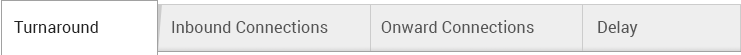
<style>
.page{position:relative;width:741px;height:55px;background:#eeeeee}
.page>*{position:absolute;margin:0}
.t1{font:16px "Roboto-Regular";color:#222222}
.t2{font:16px "Roboto-Regular";color:#555555}
</style>
<div class="page">
<p class="t1" style="left:14px;top:21px;width:84px;height:12px">Turnaround</p>
<p class="t2" style="left:172px;top:20px;width:156px;height:13px">Inbound Connections</p>
<p class="t2" style="left:381px;top:20px;width:153px;height:13px">Onward Connections</p>
<p class="t2" style="left:598px;top:21px;width:40px;height:16px">Delay</p>
</div>
